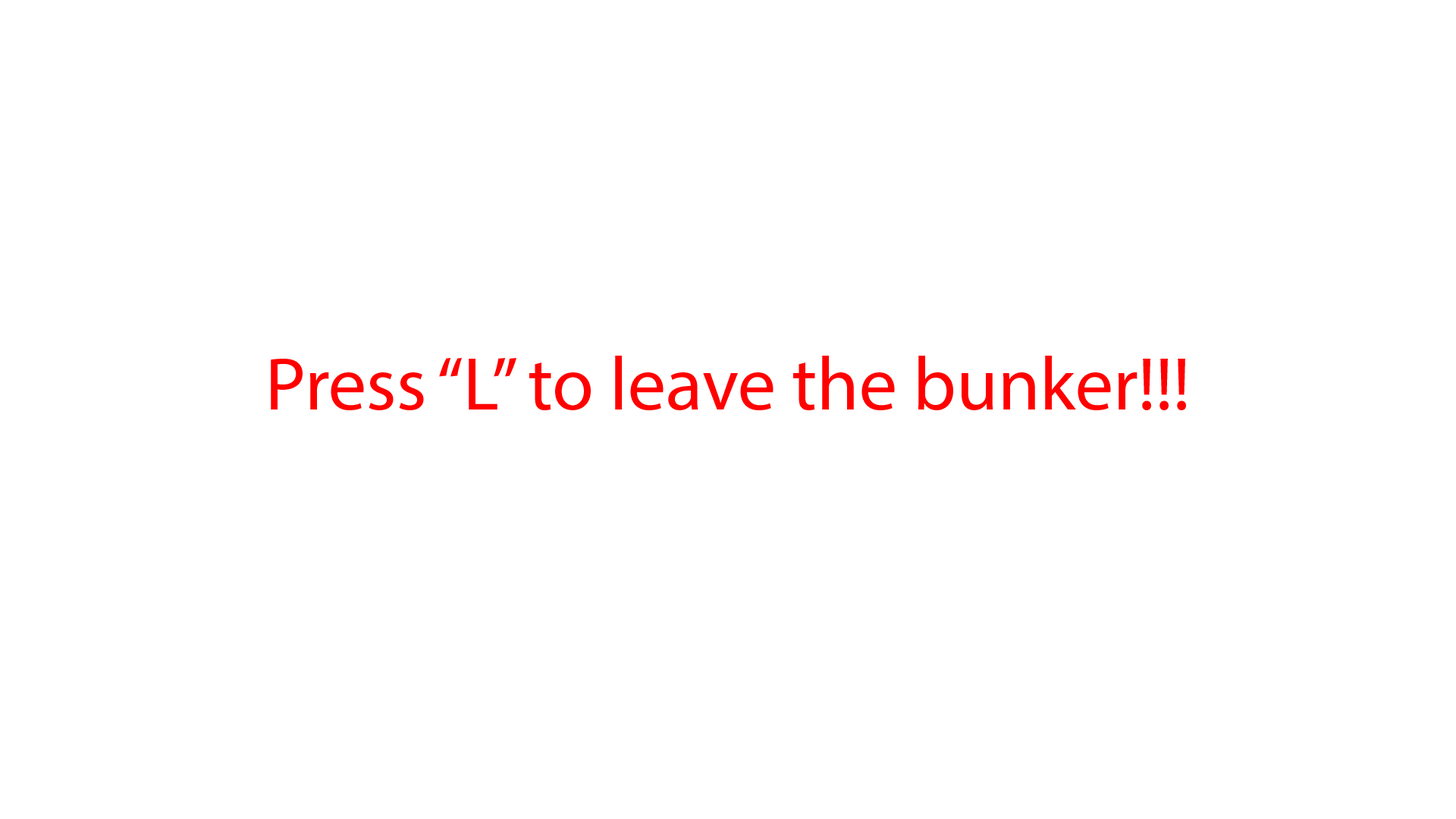
<style>
.page{position:relative;width:1456px;height:819px;background:#ffffff}
.page>*{position:absolute;margin:0}
.t1{font:75.8px "MyriadPro-Regular";color:#ff0000}
</style>
<div class="page">
<p class="t1" style="left:271px;top:356px;width:915px;height:54px">Press “L” to leave the bunker!!!</p>
</div>
